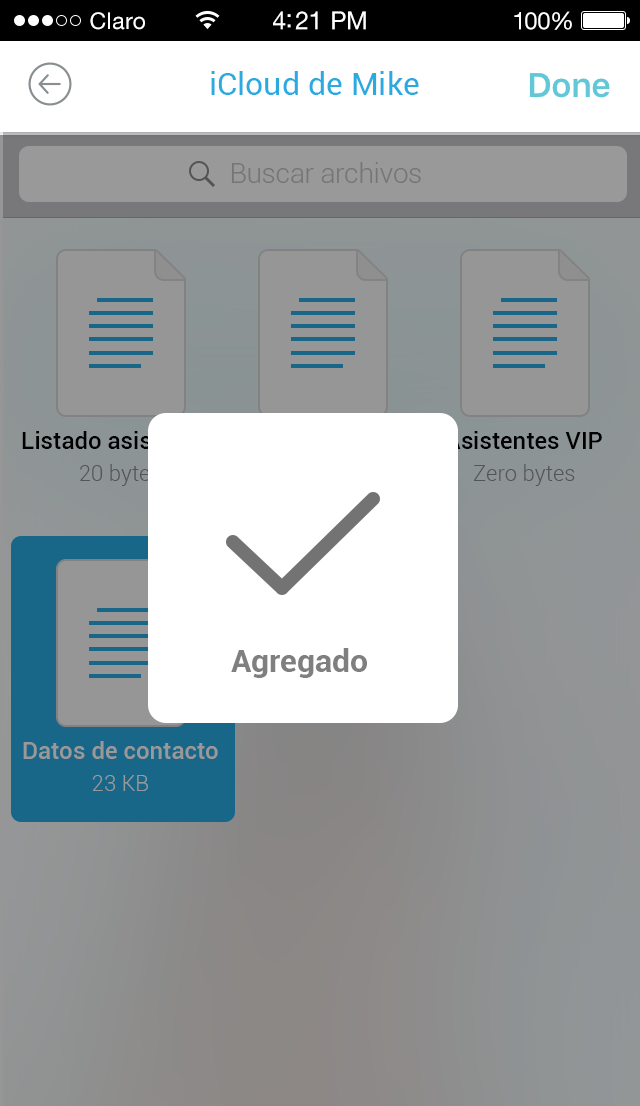
<style>
.page{position:relative;width:640px;height:1106px;background:#ffffff}
.page>*{position:absolute;margin:0}
.t1{font:23px "HelveticaNeueLTStd-Roman";letter-spacing:0.02em;color:#ffffff}
.t2{font:25px "HelveticaNeueLTStd-Roman";letter-spacing:-0.02em;color:#ffffff}
.t3{font:24px "HelveticaNeueLTStd-Roman";letter-spacing:-0.02em;color:#ffffff}
.t4{font:32px "Roboto-Regular";color:#29abe2}
.t5{font:28px "Roboto-Light";letter-spacing:-0.01em;color:#757575}
.t6{font:24px "Roboto-Medium";color:#000000}
.t7{font:22px "Roboto-Light";letter-spacing:0.005em;color:#555558}
.t8{font:32px "Roboto-Bold";color:#7f7f7f}
.t9{font:24px "Roboto-Medium";color:#999999}
.t10{font:22px "Roboto-Light";letter-spacing:0.005em;color:#999999}
</style>
<div class="page">
<p class="t1" style="left:90px;top:12px;width:55px;height:18px">Claro</p>
<p class="t2" style="left:273px;top:11px;width:93px;height:19px">4:21 PM</p>
<p class="t3" style="left:514px;top:11px;width:58px;height:19px">100%</p>
<p class="t4" style="left:211px;top:71px;width:208px;height:24px">iCloud de Mike</p>
<p class="t5" style="left:231px;top:162px;width:190px;height:21px">Buscar archivos</p>
<p class="t6" style="left:22px;top:431px;width:197px;height:18px">Listado asistentes</p>
<p class="t6" style="left:446px;top:431px;width:156px;height:18px">Asistentes VIP</p>
<p class="t7" style="left:80px;top:464px;width:81px;height:22px">20 bytes</p>
<p class="t7" style="left:473px;top:464px;width:102px;height:22px">Zero bytes</p>
<p class="t8" style="left:231px;top:648px;width:136px;height:30px">Agregado</p>
<p class="t9" style="left:23px;top:741px;width:195px;height:18px">Datos de contacto</p>
<p class="t10" style="left:93px;top:775px;width:55px;height:16px">23 KB</p>
</div>
